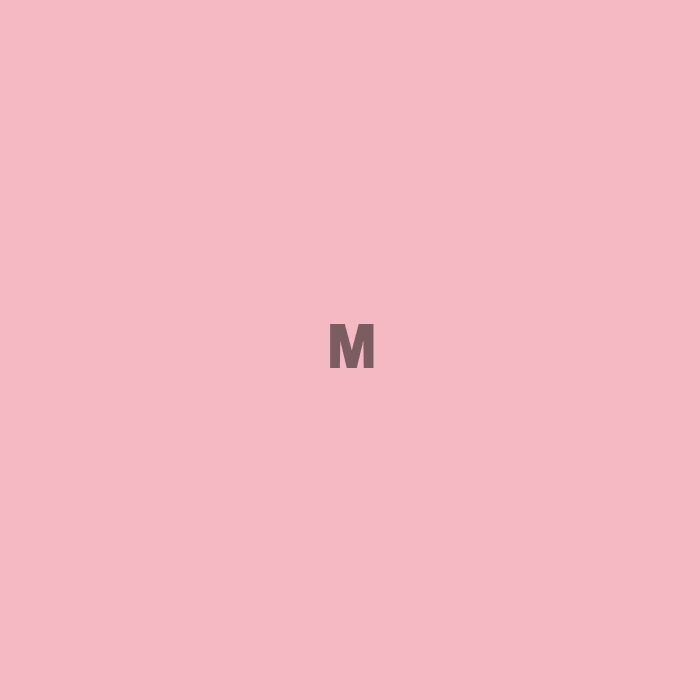
<style>
.page{position:relative;width:700px;height:700px;background:#f4b9c2}
.page>*{position:absolute;margin:0}
.t1{font:60px "Arial-BoldMT";color:#7a5c61;font-weight:bold}
</style>
<div class="page">
<p class="t1" style="left:330px;top:324px;width:44px;height:44px">M</p>
</div>
